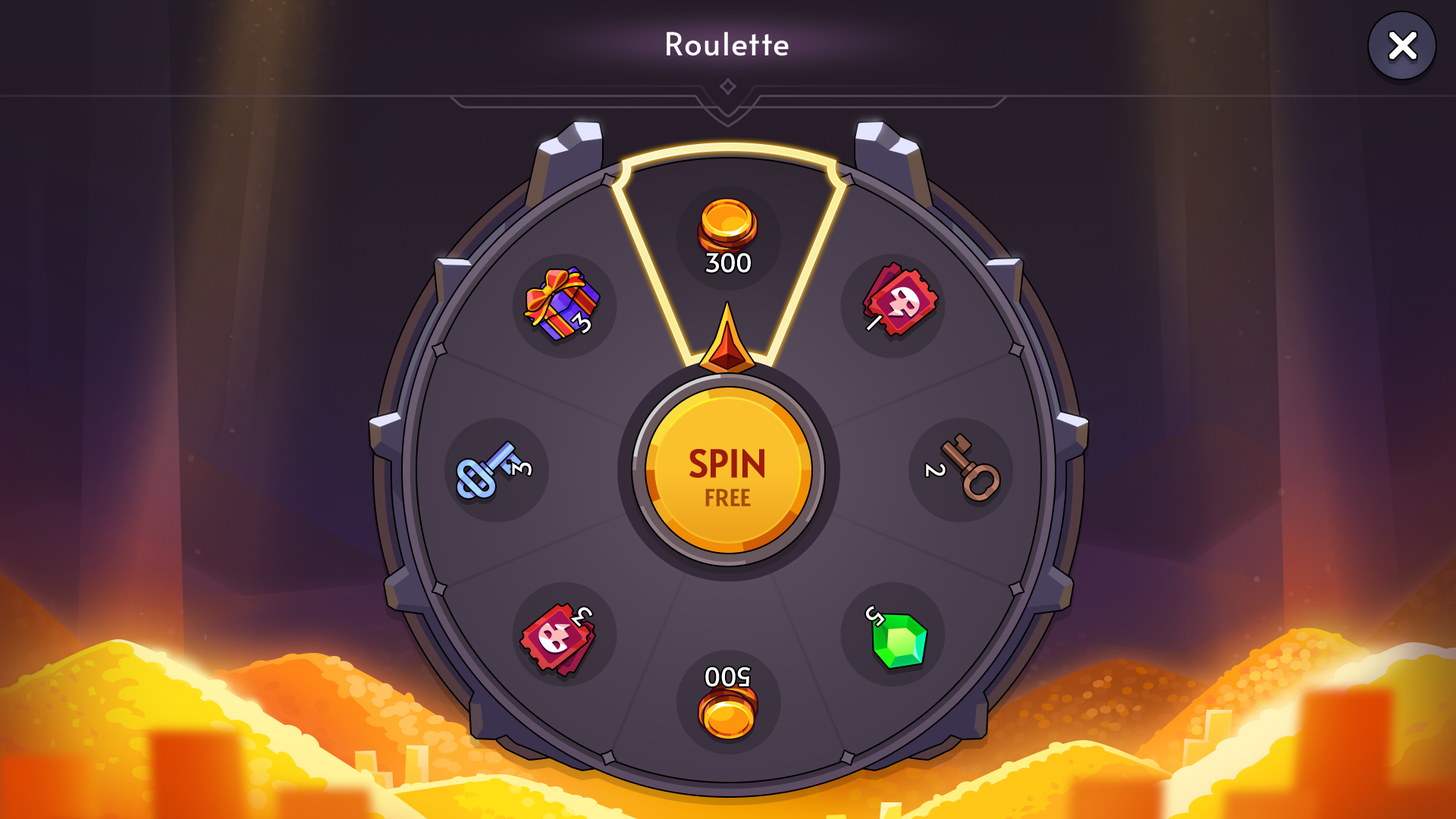
<style>
.page{position:relative;width:1456px;height:819px}
.page>*{position:absolute;margin:0}
.t1{font:31.8px "Alata-Regular";color:#ffffff}
.t2{font:25.8px "Alata-Regular";color:#ffffff}
.t3{font:37.9px "Alata-Regular";color:#9c1b0d;text-transform:uppercase;font-weight:bold}
.t4{font:22.7px "Alata-Regular";color:#a34c05;text-transform:uppercase;font-weight:bold}
</style>
<div class="page">
<p class="t1" style="left:667px;top:32px;width:122px;height:24px">Roulette</p>
<p class="t2" style="left:705px;top:253px;width:46px;height:20px">300</p>
<p class="t2" style="left:571px;top:312px;width:20px;height:22px;rotate:-45deg">3</p>
<p class="t2" style="left:866px;top:315px;width:17px;height:16px;rotate:45deg">1</p>
<p class="t3" style="left:689px;top:449px;width:75px;height:29px">Spin</p>
<p class="t2" style="left:512px;top:463px;width:20px;height:13px;rotate:-90deg">3</p>
<p class="t2" style="left:926px;top:463px;width:20px;height:14px;rotate:90deg">2</p>
<p class="t4" style="left:705px;top:488px;width:46px;height:19px">free</p>
<p class="t2" style="left:866px;top:606px;width:19px;height:20px;rotate:135deg">5</p>
<p class="t2" style="left:570px;top:607px;width:22px;height:20px;rotate:-135deg">3</p>
<p class="t2" style="left:705px;top:667px;width:46px;height:20px;rotate:180deg">500</p>
</div>
